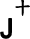
<style>
.page{position:relative;width:30px;height:39px;background:#ffffff}
.page>*{position:absolute;margin:0}
.t1{font:18px "DFKaiShu-SB-Estd-BF";color:#000000;font-weight:bold}
.t2{font:27px "ArialMT";color:#000000;font-weight:bold}
</style>
<div class="page">
<p class="t1" style="left:15px;top:0px;width:15px;height:16px">十</p>
<p class="t2" style="left:0px;top:18px;width:12px;height:21px">J</p>
</div>
